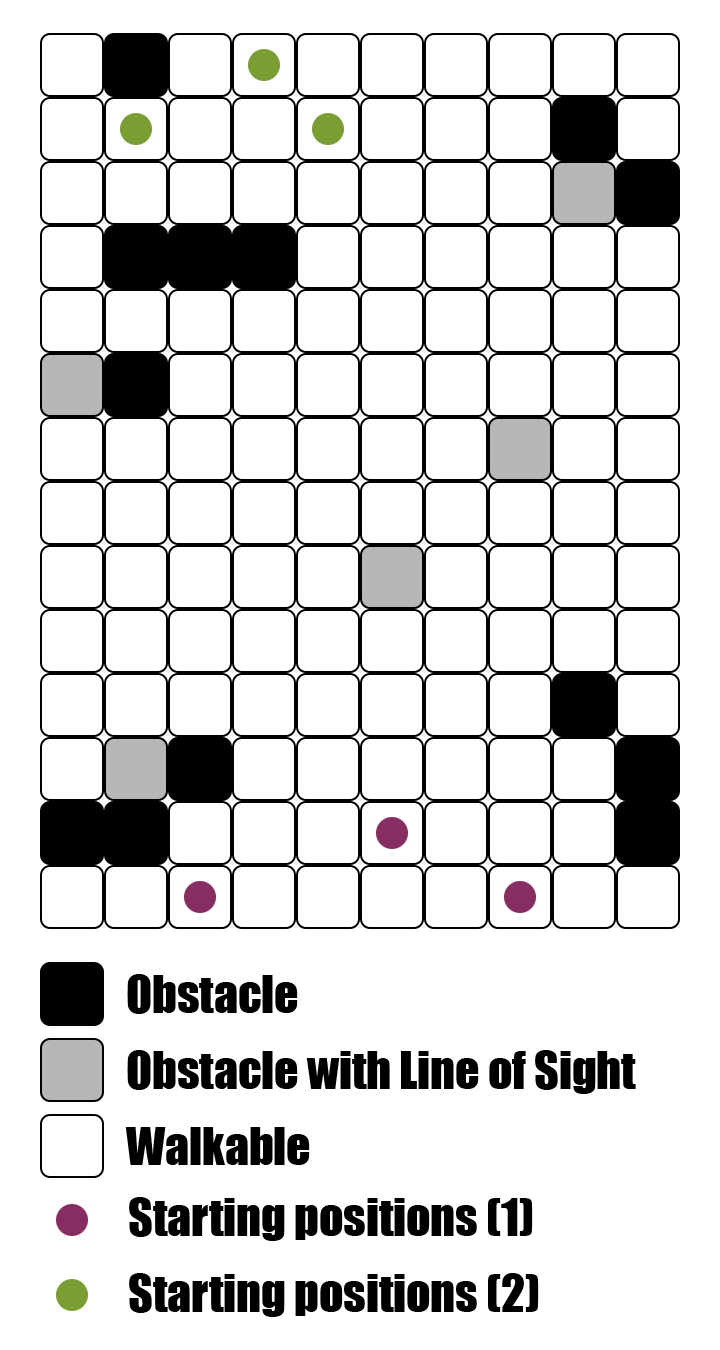
<style>
.page{position:relative;width:720px;height:1350px;background:#ffffff}
.page>*{position:absolute;margin:0}
.t1{font:48px "Impact";letter-spacing:-0.004em;color:#000000}
</style>
<div class="page">
<p class="t1" style="left:127px;top:974px;width:171px;height:40px">Obstacle</p>
<p class="t1" style="left:127px;top:1050px;width:509px;height:44px">Obstacle with Line of Sight</p>
<p class="t1" style="left:125px;top:1127px;width:185px;height:38px">Walkable</p>
<p class="t1" style="left:129px;top:1197px;width:404px;height:44px">Starting positions (1)</p>
<p class="t1" style="left:129px;top:1273px;width:410px;height:44px">Starting positions (2)</p>
</div>
